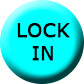
<style>
.page{position:relative;width:84px;height:84px;background:#00ffff}
.page>*{position:absolute;margin:0}
.t1{font:19px "Verdana";color:#000000;font-weight:bold}
</style>
<div class="page">
<p class="t1" style="left:17px;top:23px;width:53px;height:38px;text-align:center">LOCK IN</p>
</div>
